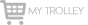
<style>
.page{position:relative;width:88px;height:25px;background:#ffffff}
.page>*{position:absolute;margin:0}
.t1{font:10px "Pasajero";color:#b4b4b4}
</style>
<div class="page">
<p class="t1" style="left:28px;top:6px;width:56px;height:9px">my trolley</p>
</div>
